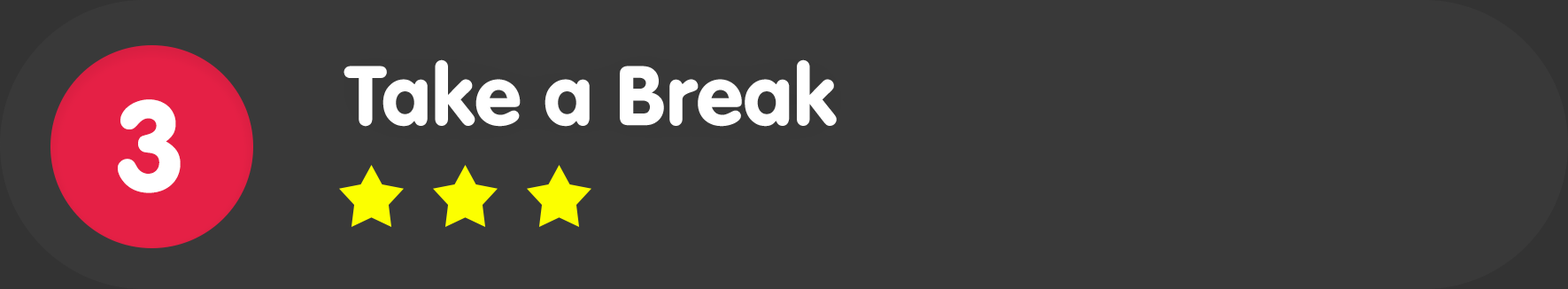
<style>
.page{position:relative;width:1568px;height:289px;background:#393939}
.page>*{position:absolute;margin:0}
.t1{font:88.5px "VAGRundschriftD";color:#ffffff}
.t2{font:132.8px "VAGRundschriftD";color:#ffffff}
</style>
<div class="page">
<p class="t1" style="left:344px;top:59px;width:493px;height:68px">Take a Break</p>
<p class="t2" style="left:118px;top:99px;width:63px;height:94px">3</p>
</div>
